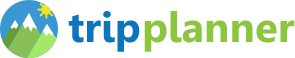
<style>
.page{position:relative;width:295px;height:58px;background:#ffffff}
.page>*{position:absolute;margin:0}
.t1{font:42px "Leelawadee-Bold";color:#0e74bb}
.t2{font:42px "Leelawadee-Bold";color:#8cc63f}
</style>
<div class="page">
<p class="t1" style="left:68px;top:11px;width:72px;height:41px">trip</p>
<p class="t2" style="left:144px;top:11px;width:151px;height:41px">planner</p>
</div>
